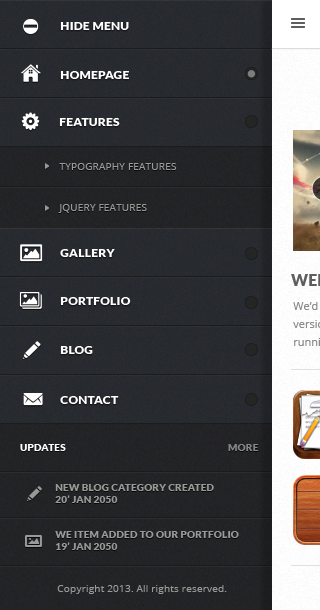
<style>
.page{position:relative;width:320px;height:610px}
.page>*{position:absolute;margin:0}
.t1{font:12px "Lato-Black";letter-spacing:0.02em;color:#ffffff}
.t2{font:10px "OpenSans";letter-spacing:0.02em;color:#9a9a9a}
.t3{font:10px "Lato-Black";letter-spacing:0.02em;color:#ffffff}
.t4{font:10px "Lato-Black";letter-spacing:0.02em;color:#878787}
.t5{font:10px "Lato-Black";letter-spacing:0.02em;color:#989a98}
.t6{font:10px "OpenSans";letter-spacing:0.02em;color:#989a98}
</style>
<div class="page">
<p class="t1" style="left:60px;top:22px;width:69px;height:8px">HIDE MENU</p>
<p class="t1" style="left:60px;top:71px;width:69px;height:8px">HOMEPAGE</p>
<p class="t1" style="left:59px;top:118px;width:61px;height:8px">FEATURES</p>
<p class="t2" style="left:59px;top:163px;width:118px;height:7px">TYPOGRAPHY FEATURES</p>
<p class="t2" style="left:58px;top:204px;width:89px;height:9px">JQUERY FEATURES</p>
<p class="t1" style="left:60px;top:249px;width:55px;height:8px">GALLERY</p>
<p class="t1" style="left:60px;top:297px;width:71px;height:8px">PORTFOLIO</p>
<p class="t1" style="left:60px;top:346px;width:33px;height:8px">BLOG</p>
<p class="t1" style="left:60px;top:396px;width:59px;height:8px">CONTACT</p>
<p class="t3" style="left:20px;top:444px;width:46px;height:7px">UPDATES</p>
<p class="t4" style="left:228px;top:444px;width:31px;height:7px">MORE</p>
<p class="t5" style="left:55px;top:484px;width:159px;height:19px">NEW BLOG CATEGORY CREATED  <br>20’ JAN 2050</p>
<p class="t5" style="left:55px;top:531px;width:184px;height:19px">WE ITEM ADDED TO OUR PORTFOLIO  <br>19’ JAN 2050</p>
<p class="t6" style="left:57px;top:585px;width:170px;height:9px">Copyright 2013. All rights reserved.</p>
</div>
